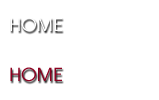
<style>
.page{position:relative;width:159px;height:100px;background:#ffffff}
.page>*{position:absolute;margin:0}
.t1{font:18px "Atlanta-Book";letter-spacing:-0.01em;color:#ffffff}
.t2{font:18px "Atlanta-Book";letter-spacing:-0.01em;color:#8d0120}
</style>
<div class="page">
<p class="t1" style="left:10px;top:17px;width:52px;height:15px">HOME</p>
<p class="t2" style="left:10px;top:67px;width:52px;height:15px">HOME</p>
</div>
